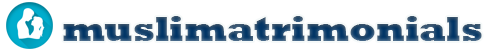
<style>
.page{position:relative;width:500px;height:50px;background:#ffffff}
.page>*{position:absolute;margin:0}
.t1{font:36px "Rockwell-ExtraBold"}
</style>
<div class="page">
<p class="t1" style="left:63px;top:16px;width:419px;height:25px">muslimatrimonials</p>
</div>
